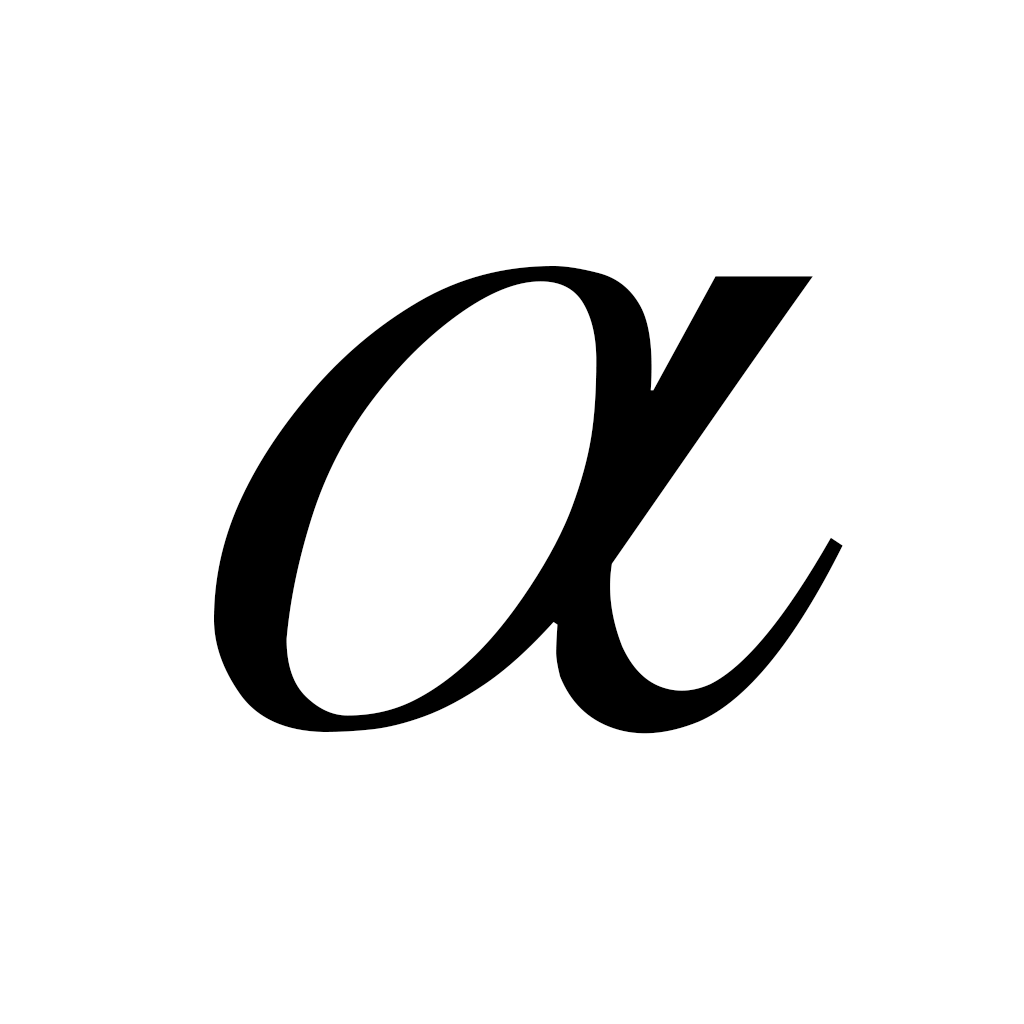
<style>
.page{position:relative;width:1024px;height:1024px;background:#ffffff}
.page>*{position:absolute;margin:0}
.t1{font:1296px "SnellRoundhand";color:#000000}
</style>
<div class="page">
<p class="t1" style="left:214px;top:266px;width:629px;height:468px">ɑ</p>
</div>
